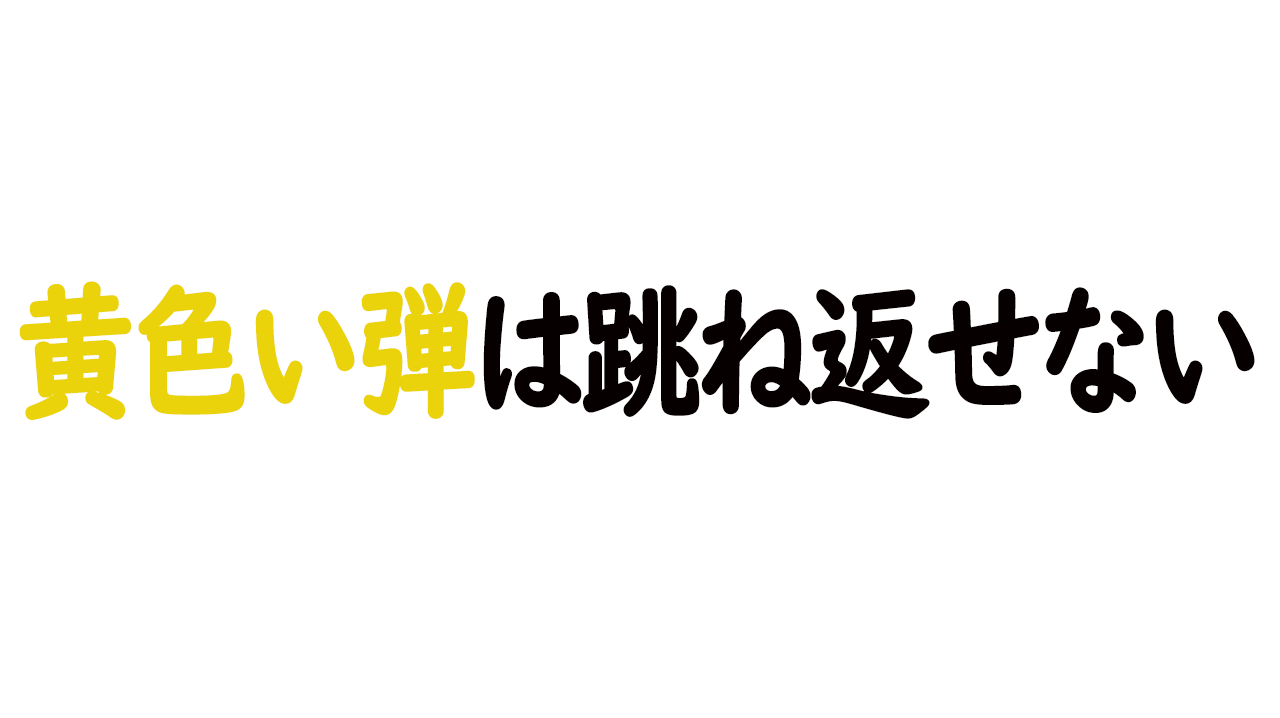
<style>
.page{position:relative;width:1280px;height:718px;background:#ffffff}
.page>*{position:absolute;margin:0}
.t1{font:145.4px "UDDigiKyokashoNK-B";letter-spacing:-0.07em;color:#060000;font-weight:bold;scale:0.83 1}
.t2{font:145.4px "UDDigiKyokashoNK-B";letter-spacing:-0.07em;color:#ebd30c;font-weight:bold;scale:0.83 1}
</style>
<div class="page">
<p class="t1" style="left:19px;top:281px;width:1236px;height:139px"><span class="t2">黄色い弾</span>は跳ね返せない</p>
</div>
